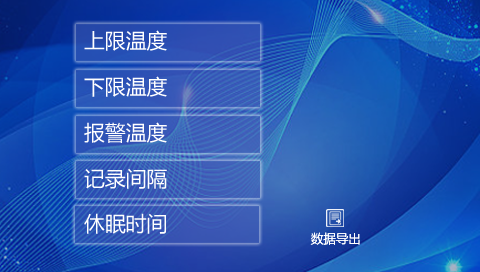
<style>
.page{position:relative;width:480px;height:272px}
.page>*{position:absolute;margin:0}
.t1{font:20.8px/45.8px "MicrosoftYaHei";color:#ffffff}
.t2{font:12.5px "MicrosoftYaHei";color:#ffffff}
</style>
<div class="page">
<p class="t1" style="left:84px;top:30px;width:83px;height:204px">上限温度<br>下限温度<br>报警温度<br>记录间隔<br>休眠时间</p>
<p class="t2" style="left:310px;top:232px;width:50px;height:13px">数据导出</p>
</div>
